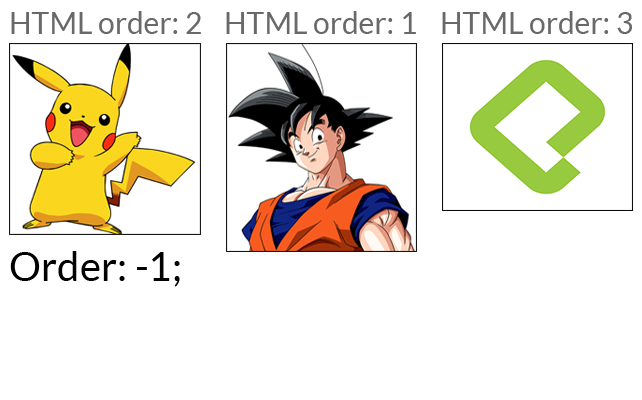
<style>
.page{position:relative;width:642px;height:400px;background:#ffffff}
.page>*{position:absolute;margin:0}
.t1{font:30px "Lato-Regular";color:#6a6969}
.t2{font:40px "Lato-Regular";color:#000000}
</style>
<div class="page">
<p class="t1" style="left:11px;top:11px;width:190px;height:23px">HTML order: 2</p>
<p class="t1" style="left:226px;top:11px;width:190px;height:23px">HTML order: 1</p>
<p class="t1" style="left:442px;top:11px;width:190px;height:23px">HTML order: 3</p>
<p class="t2" style="left:10px;top:251px;width:170px;height:36px">Order: -1;</p>
</div>
